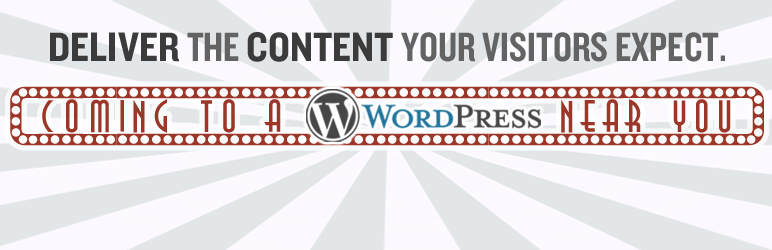
<style>
.page{position:relative;width:772px;height:250px;background:#e3e6e8}
.page>*{position:absolute;margin:0}
.t1{font:42.6px "Knockout-HTF49-Liteweight";color:#636363;text-transform:uppercase}
.t2{font:42.6px "Knockout-HTF50-Welterweight";color:#3b3b3b;text-transform:uppercase}
.t3{font:45px "Showtime";color:#9b3628}
</style>
<div class="page">
<p class="t1" style="left:50px;top:32px;width:675px;height:30px"><span class="t2">Deliver </span>the <span class="t2">content </span>your visitors expect.</p>
<p class="t3" style="left:10px;top:86px;width:754px;height:60px">{coming_to_a____________NEAR_YOU}</p>
</div>
